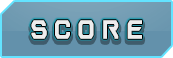
<style>
.page{position:relative;width:173px;height:58px;background:#6391ab}
.page>*{position:absolute;margin:0}
.t1{font:25px "VoyagerGrotesqueBold";letter-spacing:0.3em;color:#ffffff}
</style>
<div class="page">
<p class="t1" style="left:31px;top:20px;width:111px;height:19px">SCORE</p>
</div>
